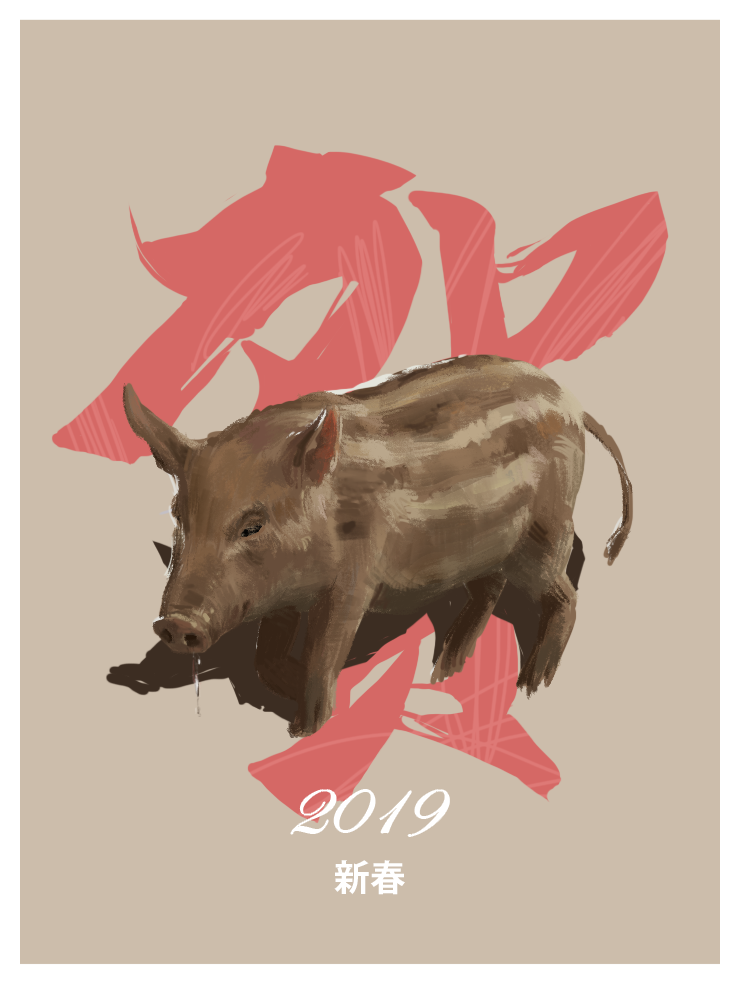
<style>
.page{position:relative;width:740px;height:985px;background:#ccbdab}
.page>*{position:absolute;margin:0}
.t1{font:80px "EdwardianScriptITC";color:#ffffff}
.t2{font:36px "KozGoPr6N-Bold";color:#ffffff}
</style>
<div class="page">
<p class="t1" style="left:291px;top:790px;width:158px;height:46px">2019</p>
<p class="t2" style="left:334px;top:860px;width:71px;height:35px">新春</p>
</div>
